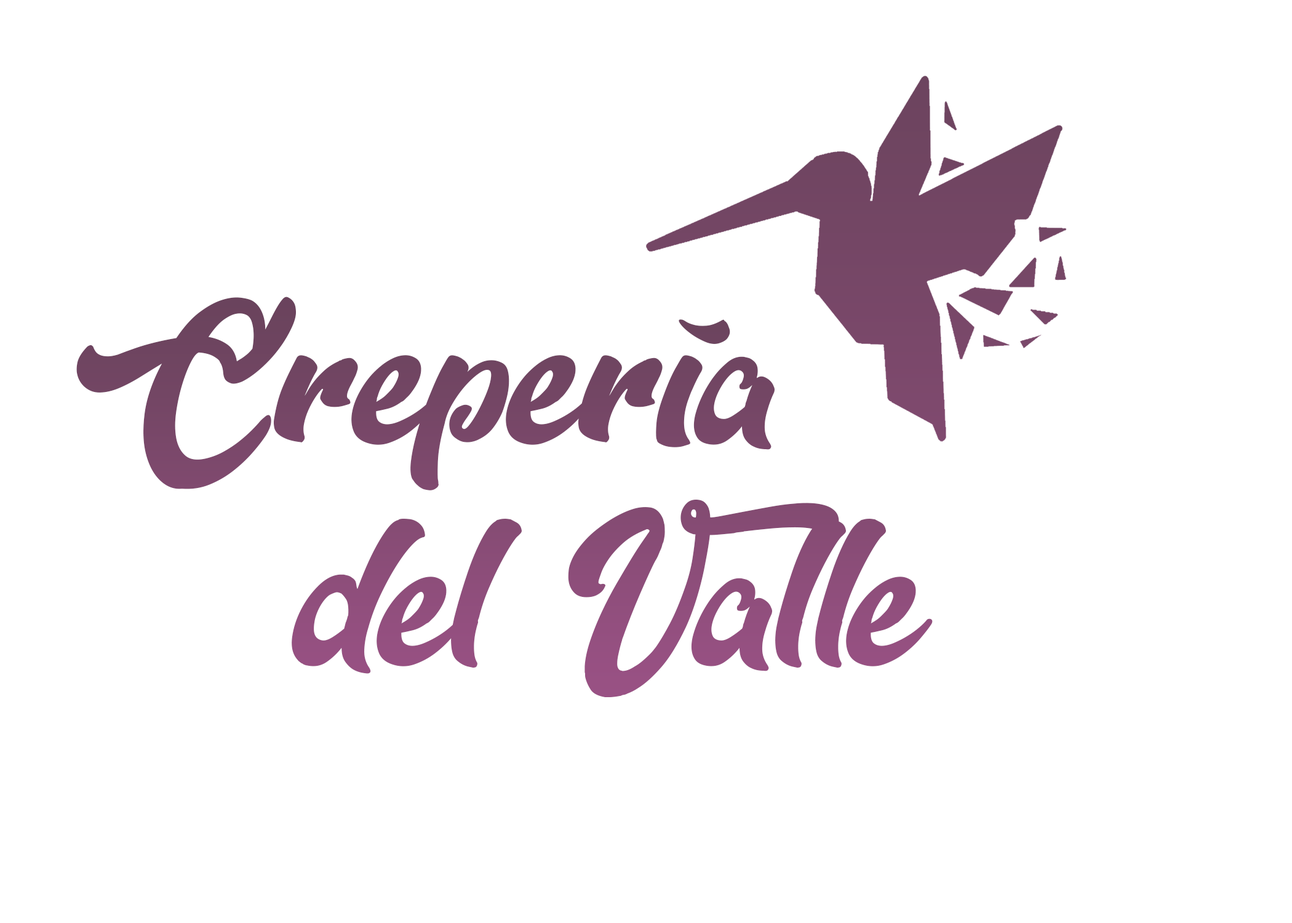
<style>
.page{position:relative;width:1292px;height:923px;background:#ffffff}
.page>*{position:absolute;margin:0}
.t1{font:184.6px "Dopestyle";color:#844b72}
</style>
<div class="page">
<p class="t1" style="left:76px;top:297px;width:857px;height:400px;text-align:center">Crepería                del Valle</p>
</div>
